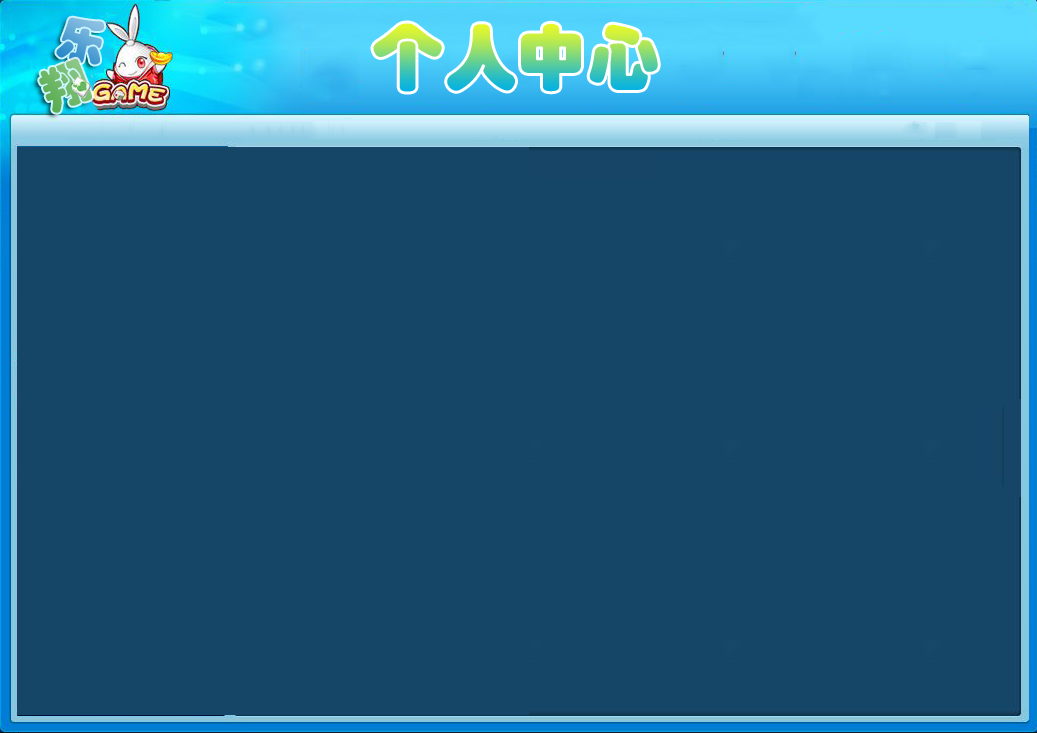
<style>
.page{position:relative;width:1037px;height:733px;background:#154667}
.page>*{position:absolute;margin:0}
.t1{font:72px "STHupo"}
</style>
<div class="page">
<p class="t1" style="left:373px;top:23px;width:285px;height:69px">个人中心</p>
</div>
